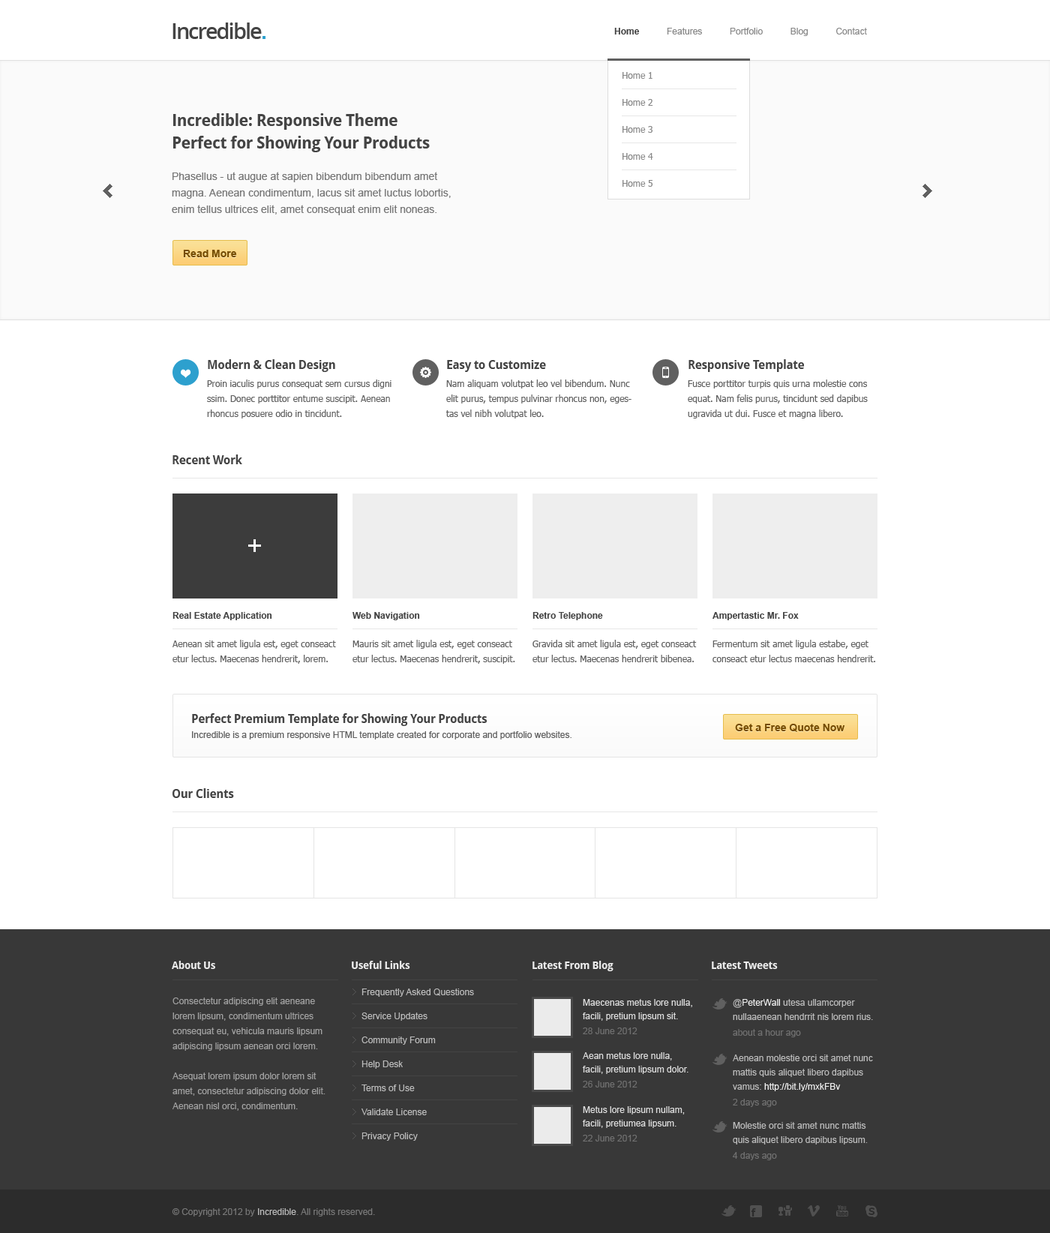
<style>
.page{position:relative;width:1050px;height:1233px;background:#ffffff}
.page>*{position:absolute;margin:0}
.t1{font:21.8px "OpenSans-Semibold";letter-spacing:-0.07em;color:#444444}
.t2{font:9px "ArialMT";color:#888888}
.t3{font:9px "Arial-BoldMT";color:#444444}
.t4{font:9px/27px "Tahoma";color:#888888}
.t5{font:10.5px/16.5px "ArialMT";color:#777777}
.t6{font:16.5px/22.5px "OpenSans-Bold";letter-spacing:-0.025em;color:#444444}
.t7{font:16.5px/22.5px "DroidSans-Bold";letter-spacing:-0.025em;color:#444444}
.t8{font:10.5px/18px "ArialMT";color:#777777}
.t9{font:10.5px "Arial-BoldMT";color:#754c00}
.t10{font:9px/15px "Tahoma";color:#606060}
.t11{font:12px/15px "DroidSans-Bold";letter-spacing:-0.025em;color:#444444}
.t12{font:9px/18px "Tahoma";color:#606060}
.t13{font:12px "DroidSans-Bold";letter-spacing:-0.025em;color:#444444}
.t14{font:9px/13.5px "Arial-BoldMT";color:#444444}
.t15{font:9px/15px "ArialMT";color:#606060}
.t16{font:12px/12px "DroidSans-Bold";letter-spacing:-0.025em;color:#444444}
.t17{font:10.5px "DroidSans-Bold";letter-spacing:-0.025em;color:#ffffff}
.t18{font:9px/24px "ArialMT";color:#bbbbbb}
.t19{font:9px/15px "ArialMT";color:#a1a1a1}
.t20{font:9px/13.5px "ArialMT";color:#dddddd}
.t21{font:9px/15px "ArialMT";color:#707070}
.t22{font:9px/14.2px "ArialMT";color:#bbbbbb}
.t23{font:9px/14.2px "ArialMT";color:#eeeeee}
.t24{font:9px/15.8px "ArialMT";color:#707070}
.t25{font:9px/14.2px "ArialMT";color:#aaaaaa}
.t26{font:9px "ArialMT";color:#777777}
.t27{font:9px "ArialMT";color:#bbbbbb}
</style>
<div class="page">
<p class="t1" style="left:172px;top:22px;width:90px;height:17px">Incredible</p>
<p class="t2" style="left:614px;top:28px;width:253px;height:8px"><span class="t3">Home           </span>Features           Portfolio           Blog           Contact</p>
<p class="t4" style="left:622px;top:72px;width:31px;height:115px;text-align:justify">Home 1<br>Home 2<br>Home 3<br>Home 4<br>Home 5</p>
<p class="t5" style="left:172px;top:113px;width:279px;height:102px"><span class="t6">I</span><span class="t7">ncredible: Responsive Theme <br>Perfect for Showing Your Products<br><br></span><span class="t8">Phasellus - ut augue at sapien bibendum bibendum amet </span>magna. Aenean condimentum, lacus sit amet luctus lobortis, enim tellus ultrices elit, amet consequat enim elit noneas.</p>
<p class="t9" style="left:183px;top:250px;width:54px;height:7px">Read More</p>
<p class="t10" style="left:207px;top:359px;width:185px;height:59px"><span class="t11">Modern &amp; Clean Design<br></span><span class="t12">Proin iaculis purus consequat sem cursus digni </span>ssim. Donec porttitor entume suscipit. Aenean rhoncus posuere odio in tincidunt.</p>
<p class="t10" style="left:446px;top:360px;width:186px;height:58px"><span class="t11">Easy to Customize<br></span><span class="t12">Nam aliquam volutpat leo vel bibendum. Nunc </span>elit purus, tempus pulvinar rhoncus non, egestas vel nibh volutpat leo.</p>
<p class="t10" style="left:688px;top:359px;width:180px;height:59px"><span class="t11">Responsive Template<br></span><span class="t12">Fusce porttitor turpis quis urna molestie cons </span>equat. Nam felis purus, tincidunt sed dapibus ugravida ut dui. Fusce et magna libero.</p>
<p class="t13" style="left:172px;top:454px;width:70px;height:10px">Recent Work</p>
<p class="t10" style="left:172px;top:612px;width:164px;height:52px"><span class="t14">Real Estate Application<br><br></span>Aenean sit amet ligula est, eget conseact etur lectus. Maecenas hendrerit, lorem.</p>
<p class="t10" style="left:352px;top:612px;width:163px;height:52px"><span class="t14">Web Navigation<br><br></span>Mauris sit amet ligula est, eget conseact etur lectus. Maecenas hendrerit, suscipit.</p>
<p class="t10" style="left:532px;top:612px;width:165px;height:50px"><span class="t14">Retro Telephone<br><br></span>Gravida sit amet ligula est, eget conseact etur lectus. Maecenas hendrerit bibenea.</p>
<p class="t10" style="left:712px;top:612px;width:163px;height:50px"><span class="t14">Ampertastic Mr. Fox<br><br></span>Fermentum sit amet ligula estabe, eget conseact etur lectus maecenas hendrerit.</p>
<p class="t15" style="left:192px;top:713px;width:380px;height:27px"><span class="t16"><br>Perfect Premium Template for Showing Your Products<br></span>Incredible is a premium responsive HTML template created for corporate and portfolio websites.</p>
<p class="t9" style="left:735px;top:724px;width:109px;height:8px">Get a Free Quote Now</p>
<p class="t13" style="left:172px;top:788px;width:62px;height:10px">Our Clients</p>
<p class="t17" style="left:172px;top:961px;width:43px;height:8px;opacity:0.9">About Us</p>
<p class="t17" style="left:352px;top:961px;width:58px;height:8px;opacity:0.9">Useful Links</p>
<p class="t17" style="left:532px;top:961px;width:82px;height:10px;opacity:0.9">Latest From Blog</p>
<p class="t17" style="left:712px;top:962px;width:66px;height:7px;opacity:0.9">Latest Tweets</p>
<p class="t18" style="left:362px;top:988px;width:112px;height:153px">Frequently Asked Questions<br>Service Updates<br>Community Forum<br>Help Desk<br>Terms of Use<br>Validate License<br>Privacy Policy</p>
<p class="t19" style="left:172px;top:998px;width:154px;height:113px">Consectetur adipiscing elit aeneane lorem lipsum, condimentum ultrices consequat eu, vehicula mauris lipsum adipiscing lipsum aenean orci lorem.<br> <br>Asequat lorem ipsum dolor lorem sit amet, consectetur adipiscing dolor elit. Aenean nisl orci, condimentum.</p>
<p class="t20" style="left:583px;top:999px;width:109px;height:35px">Maecenas metus lore nulla, facili, pretium lipsum sit.<br><span class="t21">28 June 2012</span></p>
<p class="t22" style="left:733px;top:999px;width:140px;height:38px">@<span class="t23">PeterWall </span>utesa ullamcorper nullaaenean hendrrit nis lorem rius.<br><span class="t24">about a hour ago</span></p>
<p class="t20" style="left:583px;top:1052px;width:105px;height:36px">Aean metus lore nulla, facili, pretium lipsum dolor.<br><span class="t21">26 June 2012</span></p>
<p class="t22" style="left:733px;top:1054px;width:140px;height:53px">Aenean molestie orci sit amet nunc mattis quis aliquet libero dapibus vamus: <span class="t23">http://bit.ly/mxkFBv<br></span><span class="t24">2 days ago</span></p>
<p class="t20" style="left:583px;top:1106px;width:102px;height:36px">Metus lore lipsum nullam, facili, pretiumea lipsum.<br><span class="t21">22 June 2012</span></p>
<p class="t22" style="left:733px;top:1122px;width:135px;height:38px">Molestie orci sit amet nunc mattis quis aliquet libero dapibus lipsum<span class="t25">.<br></span><span class="t24">4 days ago</span></p>
<p class="t26" style="left:172px;top:1208px;width:203px;height:8px">© Copyright 2012 by <span class="t27">Incredible</span>. All rights reserved.</p>
</div>
